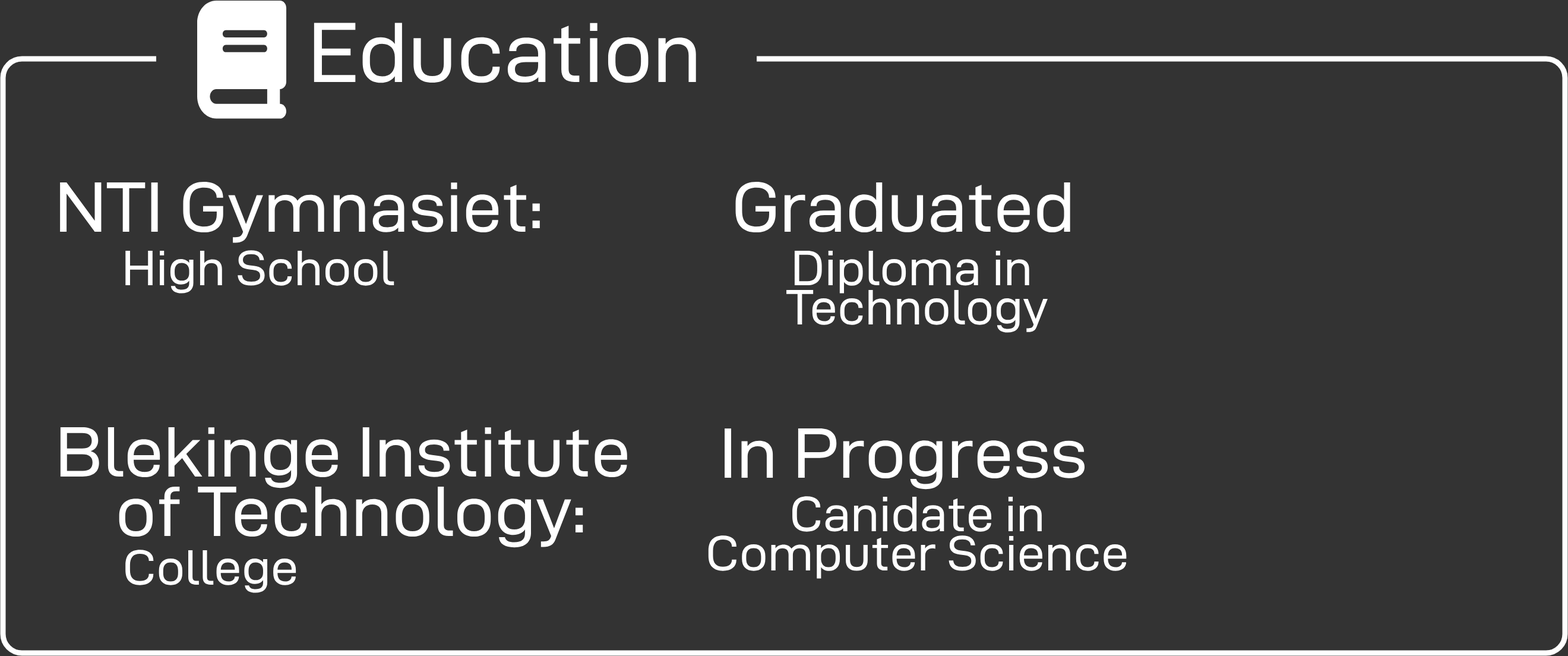
<style>
.page{position:relative;width:1568px;height:656px;background:#333333}
.page>*{position:absolute;margin:0}
.t1{font:85.6px "D-DINExp";color:#ffffff}
.t2{font:71.3px "D-DINExp";color:#ffffff}
.t3{font:49.9px "D-DINExp";color:#ffffff}
.t4{font:49.9px/35.6px "D-DINExp";color:#ffffff}
.t5{font:71.3px/59.4px "D-DINExp";color:#ffffff}
</style>
<div class="page">
<p class="t1" style="left:314px;top:23px;width:382px;height:60px">Education</p>
<p class="t2" style="left:60px;top:181px;width:480px;height:62px">NTI Gymnasiet:</p>
<p class="t2" style="left:735px;top:181px;width:335px;height:52px">Graduated</p>
<p class="t3" style="left:125px;top:250px;width:269px;height:43px">High School</p>
<p class="t4" style="left:786px;top:250px;width:262px;height:83px;text-align:center">Diploma in <br>Technology</p>
<p class="t5" style="left:60px;top:427px;width:567px;height:121px;text-align:center">Blekinge Institute<br> of Technology:</p>
<p class="t2" style="left:725px;top:428px;width:360px;height:61px">In Progress</p>
<p class="t4" style="left:708px;top:496px;width:419px;height:82px;text-align:center">Canidate in<br>Computer Science</p>
<p class="t3" style="left:125px;top:549px;width:171px;height:44px">College</p>
</div>
